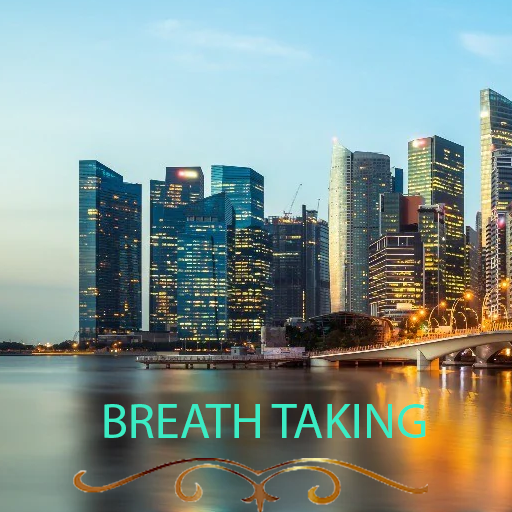
<style>
.page{position:relative;width:512px;height:512px}
.page>*{position:absolute;margin:0}
.t1{font:50px "MyriadPro-Regular";color:#3becc4}
</style>
<div class="page">
<p class="t1" style="left:104px;top:404px;width:322px;height:34px">BREATH TAKING</p>
</div>
